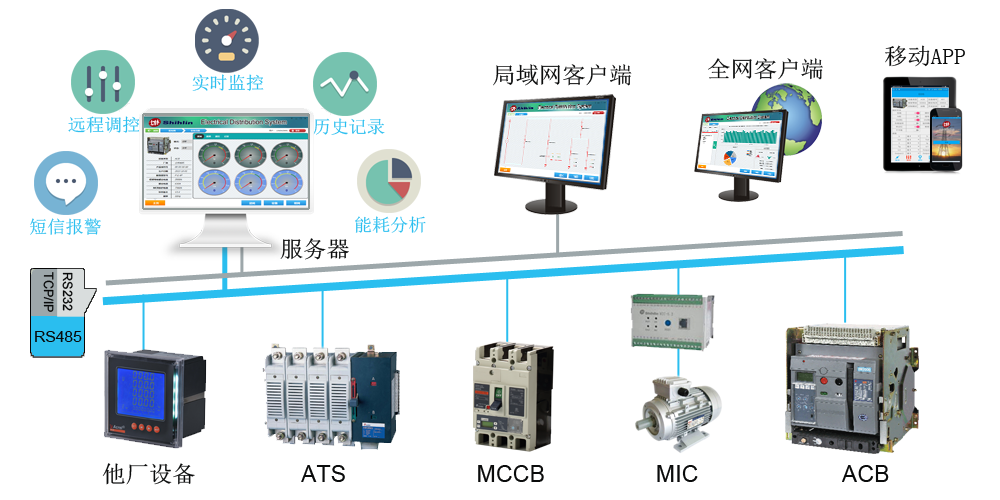
<style>
.page{position:relative;width:1000px;height:500px;background:#ffffff}
.page>*{position:absolute;margin:0}
.t1{font:22.9px "SimSun";color:#0a0b0b}
.t2{font:17.8px "SimSun";color:#2abeef}
.t3{font:22.9px "ArialMT";color:#0a0b0b}
</style>
<div class="page">
<p class="t1" style="left:885px;top:45px;width:80px;height:22px">移动APP</p>
<p class="t1" style="left:493px;top:64px;width:139px;height:22px">局域网客户端</p>
<p class="t1" style="left:708px;top:58px;width:115px;height:22px">全网客户端</p>
<p class="t2" style="left:192px;top:74px;width:72px;height:17px">实时监控</p>
<p class="t2" style="left:68px;top:116px;width:72px;height:17px">远程调控</p>
<p class="t2" style="left:313px;top:118px;width:72px;height:17px">历史记录</p>
<p class="t2" style="left:30px;top:218px;width:71px;height:17px">短信报警</p>
<p class="t2" style="left:355px;top:216px;width:71px;height:17px">能耗分析</p>
<p class="t1" style="left:280px;top:238px;width:69px;height:22px">服务器</p>
<p class="t3" style="left:102px;top:463px;width:787px;height:22px"><span class="t1">他厂设备         </span>ATS                    MCCB                 MIC                      ACB</p>
</div>
